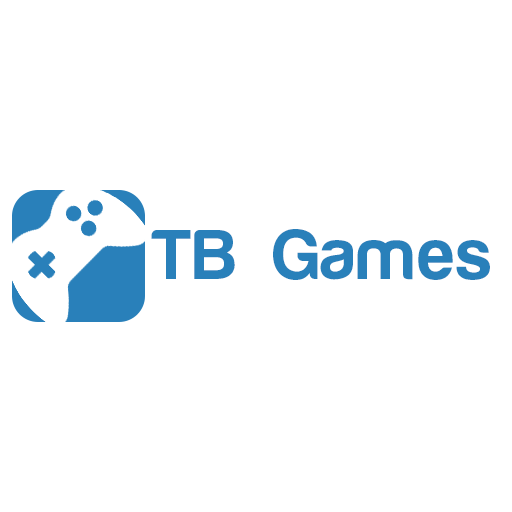
<style>
.page{position:relative;width:512px;height:512px;background:#ffffff}
.page>*{position:absolute;margin:0}
.t1{font:72px "HarabaraMaisBold-HarabaraMaisBold";color:#2980ba}
</style>
<div class="page">
<p class="t1" style="left:151px;top:229px;width:339px;height:51px">TB Games</p>
</div>
